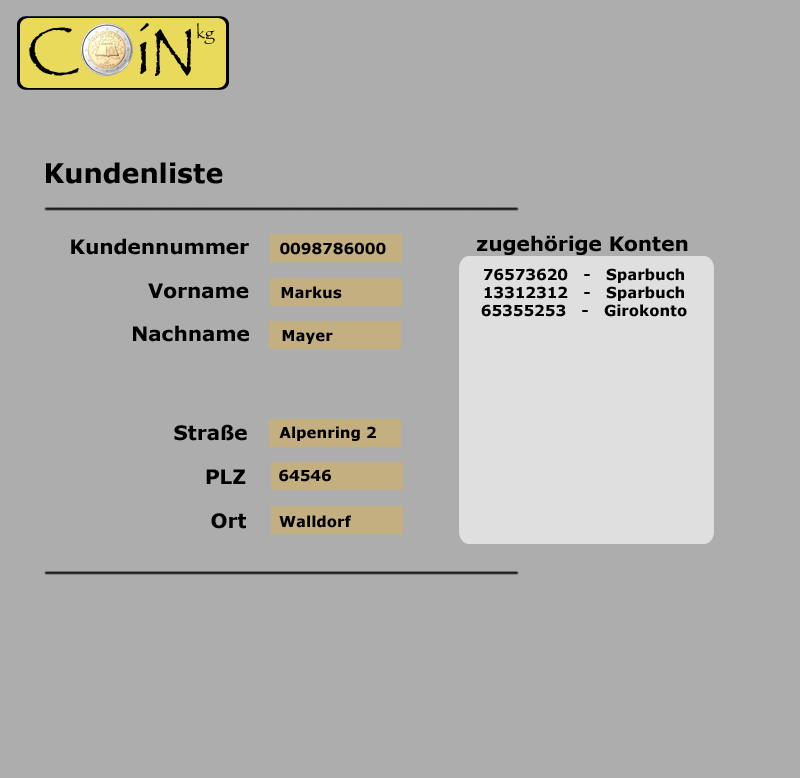
<style>
.page{position:relative;width:800px;height:778px;background:#adadad}
.page>*{position:absolute;margin:0}
.t1{font:70px "Papyrus";color:#000000}
.t2{font:16px "Papyrus";color:#000000}
.t3{font:27px "Verdana-Bold";color:#000000}
.t4{font:20px "Verdana-Bold";color:#000000}
.t5{font:15px "Verdana-Bold";color:#000000}
</style>
<div class="page">
<p class="t1" style="left:29px;top:27px;width:50px;height:49px">C</p>
<p class="t1" style="left:139px;top:23px;width:10px;height:51px">i</p>
<p class="t1" style="left:154px;top:28px;width:37px;height:48px">N</p>
<p class="t2" style="left:197px;top:23px;width:18px;height:21px">kg</p>
<p class="t3" style="left:46px;top:162px;width:177px;height:22px">Kundenliste</p>
<p class="t4" style="left:71px;top:238px;width:178px;height:17px">Kundennummer</p>
<p class="t5" style="left:280px;top:242px;width:106px;height:13px">0098786000</p>
<p class="t4" style="left:477px;top:235px;width:211px;height:20px">zugehörige Konten</p>
<p class="t5" style="left:481px;top:268px;width:206px;height:49px;text-align:center">76573620   -   Sparbuch<br>13312312   -   Sparbuch<br>65355253   -   Girokonto</p>
<p class="t4" style="left:148px;top:283px;width:101px;height:16px">Vorname</p>
<p class="t5" style="left:281px;top:286px;width:61px;height:13px">Markus</p>
<p class="t4" style="left:133px;top:325px;width:116px;height:17px">Nachname</p>
<p class="t5" style="left:282px;top:330px;width:51px;height:14px">Mayer</p>
<p class="t4" style="left:174px;top:424px;width:73px;height:17px">Straße</p>
<p class="t5" style="left:279px;top:426px;width:97px;height:15px">Alpenring 2</p>
<p class="t4" style="left:206px;top:469px;width:40px;height:15px">PLZ</p>
<p class="t5" style="left:279px;top:469px;width:52px;height:13px">64546</p>
<p class="t4" style="left:211px;top:513px;width:35px;height:16px">Ort</p>
<p class="t5" style="left:279px;top:515px;width:72px;height:13px">Walldorf</p>
</div>
